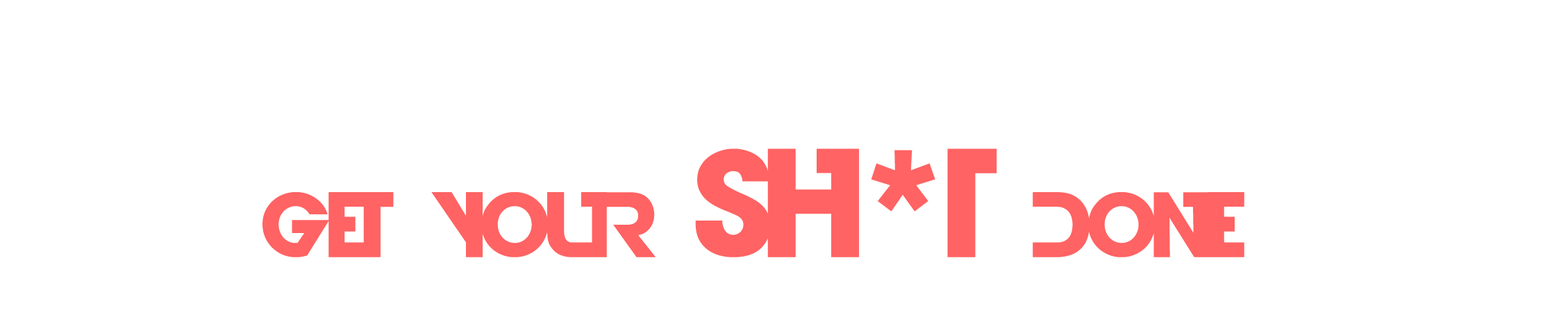
<style>
.page{position:relative;width:1568px;height:335px;background:#ffffff}
.page>*{position:absolute;margin:0}
.t1{font:86.8px "DevilBreezeBold";letter-spacing:-0.05em;color:#ff5959}
.t2{font:144.7px "DevilBreezeBold";letter-spacing:-0.05em;color:#ff5959}
</style>
<div class="page">
<p class="t1" style="left:262px;top:149px;width:982px;height:109px">GET YOUR <span class="t2">SH*T</span> DONE</p>
</div>
